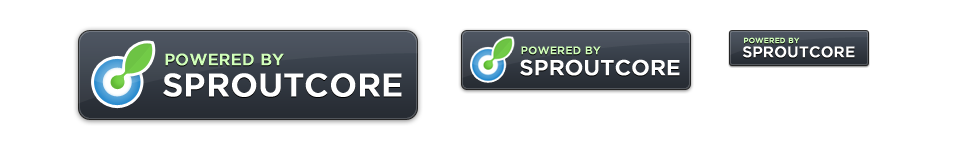
<style>
.page{position:relative;width:960px;height:150px;background:#ffffff}
.page>*{position:absolute;margin:0}
.t1{font:7.5px "GothamMedium";color:#d1ffba;font-weight:bold}
.t2{font:16px "GothamMedium";color:#d1ffba;font-weight:bold}
.t3{font:10.7px "GothamMedium";color:#d1ffba;font-weight:bold}
.t4{font:15px "GothamMedium";color:#ffffff;font-weight:bold}
.t5{font:21.4px "GothamMedium";color:#ffffff;font-weight:bold}
.t6{font:32px "GothamMedium";color:#ffffff;font-weight:bold}
</style>
<div class="page">
<p class="t1" style="left:744px;top:37px;width:56px;height:7px">POWERED BY</p>
<p class="t2" style="left:165px;top:53px;width:119px;height:13px">POWERED BY</p>
<p class="t3" style="left:521px;top:46px;width:80px;height:9px">POWERED BY</p>
<p class="t4" style="left:743px;top:46px;width:112px;height:12px">SPROUTCORE</p>
<p class="t5" style="left:520px;top:59px;width:160px;height:17px">SPROUTCORE</p>
<p class="t6" style="left:163px;top:73px;width:239px;height:24px">SPROUTCORE</p>
</div>
